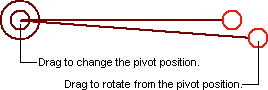
<style>
.page{position:relative;width:268px;height:90px;background:#ffffff}
.page>*{position:absolute;margin:0}
.t1{font:11px "ArialMT";color:#000000}
</style>
<div class="page">
<p class="t1" style="left:39px;top:58px;width:160px;height:10px">Drag to change the pivot position.</p>
<p class="t1" style="left:65px;top:80px;width:177px;height:10px">Drag to rotate from the pivot position.</p>
</div>
